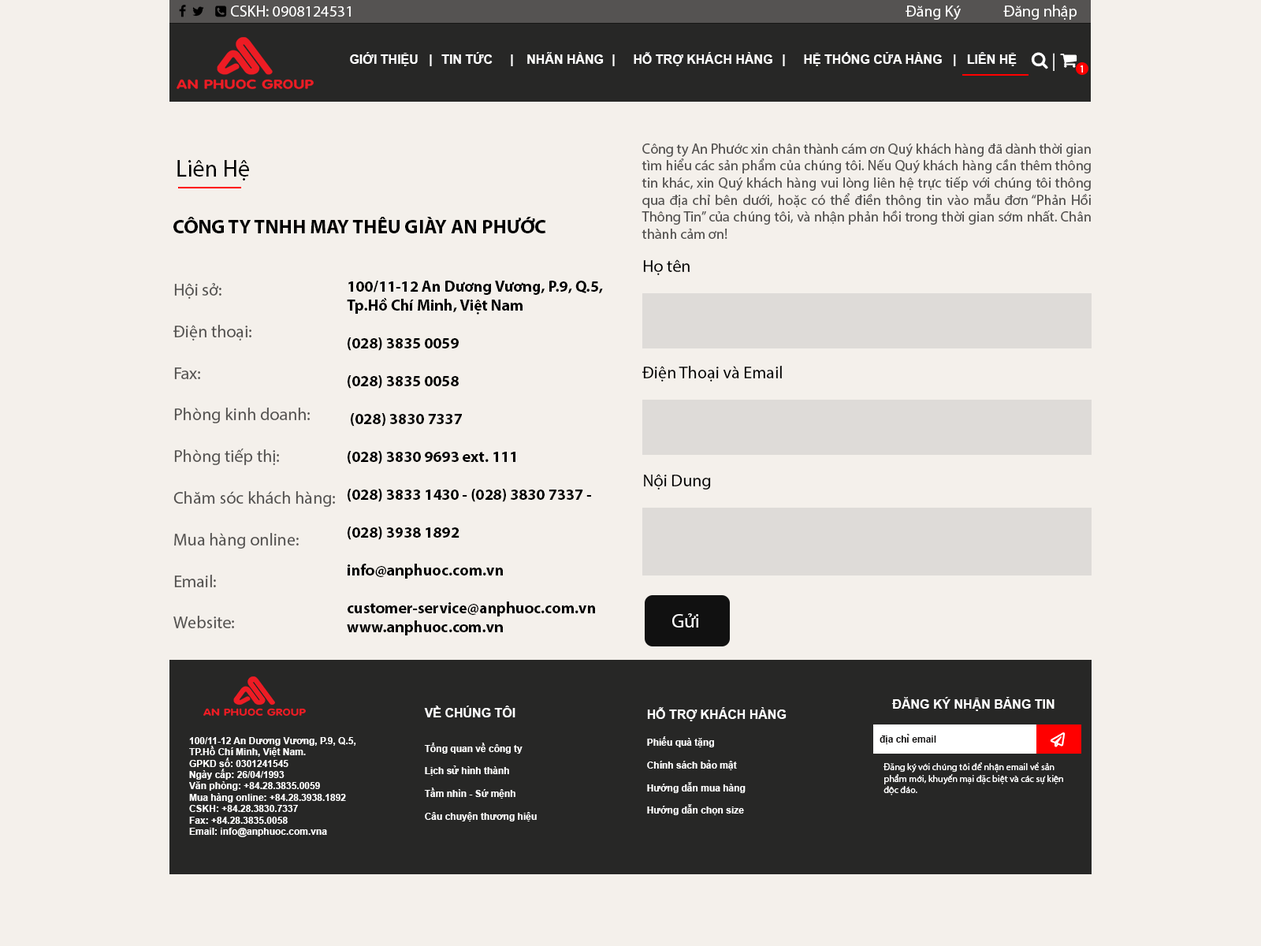
<style>
.page{position:relative;width:1261px;height:946px;background:#f4f0eb}
.page>*{position:absolute;margin:0}
.t1{font:15.8px "MyriadPro-Regular";color:#ffffff}
.t2{font:12.6px "Arial-BoldMT";color:#ffffff}
.t3{font:10.2px "MyriadPro-Regular";color:#ffffff}
.t4{font:14.2px "MyriadPro-Regular";color:#545250}
.t5{font:23.6px "MyriadPro-Regular";color:#000000}
.t6{font:19.7px "MyriadPro-Bold";color:#000000}
.t7{font:17.3px "MyriadPro-Regular";color:#000000}
.t8{font:15.8px "MyriadPro-Bold";color:#000000}
.t9{font:17.3px "MyriadPro-Regular";color:#545250}
.t10{font:19.7px "MyriadPro-Regular";color:#ffffff}
.t11{font:9.5px "Arial-BoldMT";color:#ffffff}
.t12{font:9.5px "Arial-BoldMT";color:#0f0d0d}
.t13{font:9.5px "MyriadPro-Regular";color:#ffffff}
</style>
<div class="page">
<p class="t1" style="left:231px;top:6px;width:120px;height:11px">CSKH: 0908124531</p>
<p class="t1" style="left:905px;top:5px;width:172px;height:15px">Đăng Ký             Đăng nhập</p>
<p class="t2" style="left:350px;top:52px;width:667px;height:14px">GIỚI THIỆU   |   TIN TỨC     |   NHÃN HÀNG   | HỖ TRỢ KHÁCH HÀNG   | HỆ THỐNG CỬA HÀNG   |   LIÊN HỆ</p>
<p class="t3" style="left:1080px;top:65px;width:3px;height:8px">1</p>
<p class="t4" style="left:641px;top:143px;width:450px;height:96px;text-align:justify">Công ty An Phước xin chân thành cám ơn Quý khách hàng đã dành thời gian tìm hiểu các sản phẩm của chúng tôi. Nếu Quý khách hàng cần thêm thông tin khác, xin Quý khách hàng vui lòng liên hệ trực tiếp với chúng tôi thông qua địa chỉ bên dưới, hoặc có thể điền thông tin vào mẫu đơn “Phản Hồi Thông Tin” của chúng tôi, và nhận phản hồi trong thời gian sớm nhất. Chân thành cảm ơn!</p>
<p class="t5" style="left:177px;top:160px;width:72px;height:20px">Liên Hệ</p>
<p class="t6" style="left:173px;top:217px;width:373px;height:16px">CÔNG TY TNHH MAY THÊU GIÀY AN PHƯỚC</p>
<p class="t7" style="left:643px;top:259px;width:47px;height:16px">Họ tên</p>
<p class="t8" style="left:347px;top:281px;width:256px;height:354px">100/11-12 An Dương Vương, P.9, Q.5, Tp.Hồ Chí Minh, Việt Nam<br><br>(028) 3835 0059<br><br>(028) 3835 0058<br><br> (028) 3830 7337<br><br>(028) 3830 9693 ext. 111<br><br>(028) 3833 1430 - (028) 3830 7337 - <br><br>(028) 3938 1892<br><br>info@anphuoc.com.vn<br><br>customer-service@anphuoc.com.vn<br>www.anphuoc.com.vn</p>
<p class="t9" style="left:173px;top:283px;width:162px;height:345px">Hội sở: <br><br>Điện thoại:<br><br>Fax: <br><br>Phòng kinh doanh: <br><br>Phòng tiếp thị: <br><br>Chăm sóc khách hàng: <br><br>Mua hàng online: <br><br>Email: <br><br>Website:</p>
<p class="t7" style="left:642px;top:366px;width:140px;height:15px">Điện Thoại và Email</p>
<p class="t7" style="left:644px;top:474px;width:67px;height:15px">Nội Dung</p>
<p class="t10" style="left:672px;top:613px;width:26px;height:14px">Gửi</p>
<p class="t2" style="left:891px;top:697px;width:163px;height:14px">ĐĂNG KÝ NHẬN BẢNG TIN</p>
<p class="t11" style="left:424px;top:705px;width:113px;height:116px"><span class="t2">VỀ CHÚNG TÔI<br></span><br><br>Tổng quan về công ty<br><br>Lịch sử hình thành<br><br>Tầm nhìn - Sứ mệnh<br><br>Câu chuyện thương hiệu</p>
<p class="t11" style="left:647px;top:707px;width:139px;height:108px"><span class="t2">HỖ TRỢ KHÁCH HÀNG<br><br></span>Phiếu quà tặng<br><br>Chính sách bảo mật<br><br>Hướng dẫn mua hàng<br><br>Hướng dẫn chọn size</p>
<p class="t11" style="left:189px;top:737px;width:167px;height:100px">100/11-12 An Dương Vương, P.9, Q.5, TP.Hồ Chí Minh, Việt Nam.<br>GPKD số: 0301241545<br>Ngày cấp: 26/04/1993<br>Văn phòng: +84.28.3835.0059<br>Mua hàng online: +84.28.3938.1892<br>CSKH: +84.28.3830.7337<br>Fax: +84.28.3835.0058<br>Email: info@anphuoc.com.vna</p>
<p class="t12" style="left:879px;top:734px;width:57px;height:10px">địa chỉ email</p>
<p class="t13" style="left:883px;top:762px;width:180px;height:33px">Đăng ký với chúng tôi để nhận email về sản phẩm mới, khuyến mại đặc biệt và các sự kiện độc đáo.</p>
</div>
